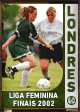
<style>
.page{position:relative;width:80px;height:112px}
.page>*{position:absolute;margin:0}
.t1{font:14.1px/12.6px "DINNextLTPro-Bold";letter-spacing:0.02em;color:#303d0b;text-transform:uppercase;font-weight:bold}
.t2{font:7.4px "DINNextLTPro-Bold";letter-spacing:0.02em;color:#ffffff;text-transform:uppercase;scale:0.95 1}
.t3{font:7.4px "DINNextLTPro-Bold";letter-spacing:0.04em;color:#ffffff;text-transform:uppercase;scale:0.95 1}
</style>
<div class="page">
<p class="t1" style="left:67px;top:6px;width:9px;height:86px">l<br>o<br>n<br>d<br>r<br>e<br>s</p>
<p class="t2" style="left:9px;top:92px;width:49px;height:6px">liga feminina</p>
<p class="t3" style="left:13px;top:100px;width:41px;height:6px">finais 2002</p>
</div>
